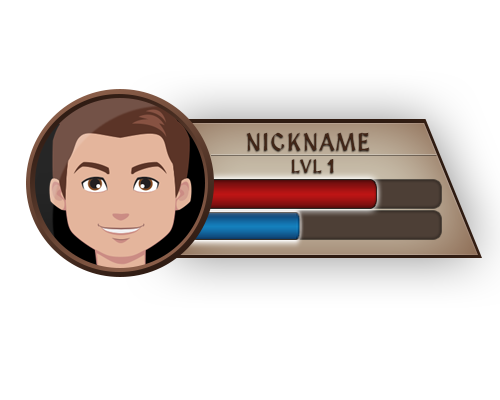
<style>
.page{position:relative;width:500px;height:400px;background:#ffffff}
.page>*{position:absolute;margin:0}
.t1{font:24px "MedievalSharp";letter-spacing:0.06em;color:#422617;text-transform:uppercase}
.t2{font:18px "MedievalSharp";letter-spacing:0.06em;color:#422617;text-transform:uppercase}
.t3{font:18px "MedievalSharp";letter-spacing:0.06em;color:#422617;text-transform:uppercase;font-weight:bold}
</style>
<div class="page">
<p class="t1" style="left:246px;top:132px;width:123px;height:19px">nickname</p>
<p class="t2" style="left:291px;top:159px;width:43px;height:14px">lvl <span class="t3">1</span></p>
</div>
